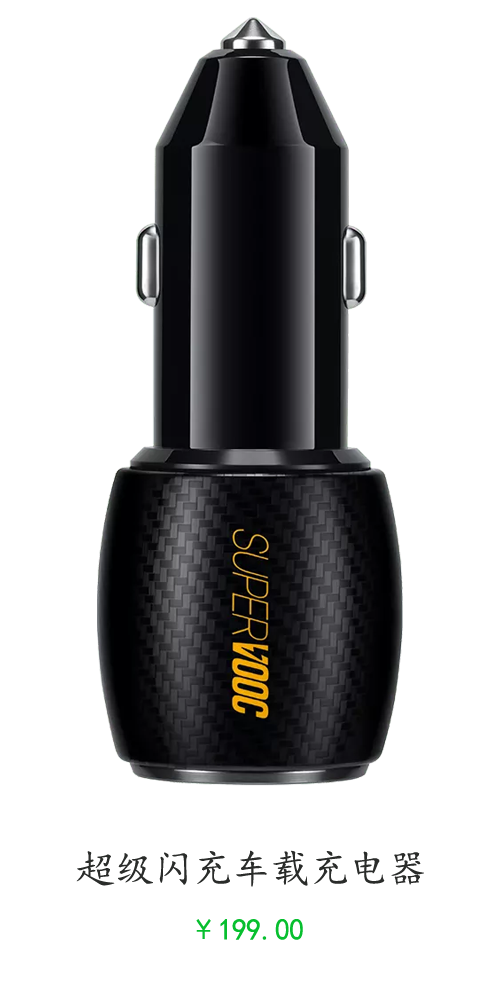
<style>
.page{position:relative;width:500px;height:1000px;background:#ffffff}
.page>*{position:absolute;margin:0}
.t1{font:40px "KaiTi";letter-spacing:-0.025em;color:#2a2c2a}
.t2{font:30px "KaiTi";letter-spacing:-0.025em;color:#07bf2f}
</style>
<div class="page">
<p class="t1" style="left:76px;top:850px;width:348px;height:37px">超级闪充车载充电器</p>
<p class="t2" style="left:196px;top:919px;width:107px;height:21px">￥199.00</p>
</div>
